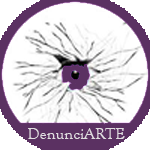
<style>
.page{position:relative;width:150px;height:150px;background:#ffffff}
.page>*{position:absolute;margin:0}
.t1{font:16.3px "GoudyOldStyleT-Regular";color:#dfdddf}
</style>
<div class="page">
<p class="t1" style="left:28px;top:128px;width:97px;height:11px">DenunciARTE</p>
</div>
